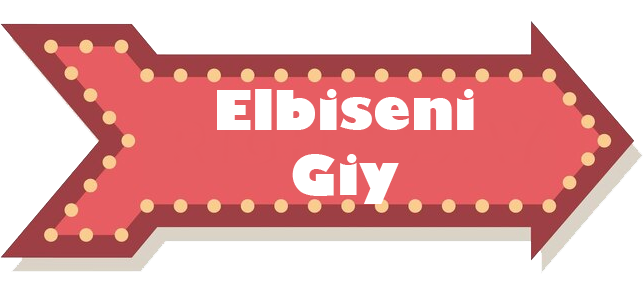
<style>
.page{position:relative;width:643px;height:287px;background:#ffffff}
.page>*{position:absolute;margin:0}
.t1{font:54.2px "GillSans-UltraBold";color:#ffffff}
</style>
<div class="page">
<p class="t1" style="left:217px;top:89px;width:257px;height:115px;text-align:center">Elbiseni<br>Giy</p>
</div>
